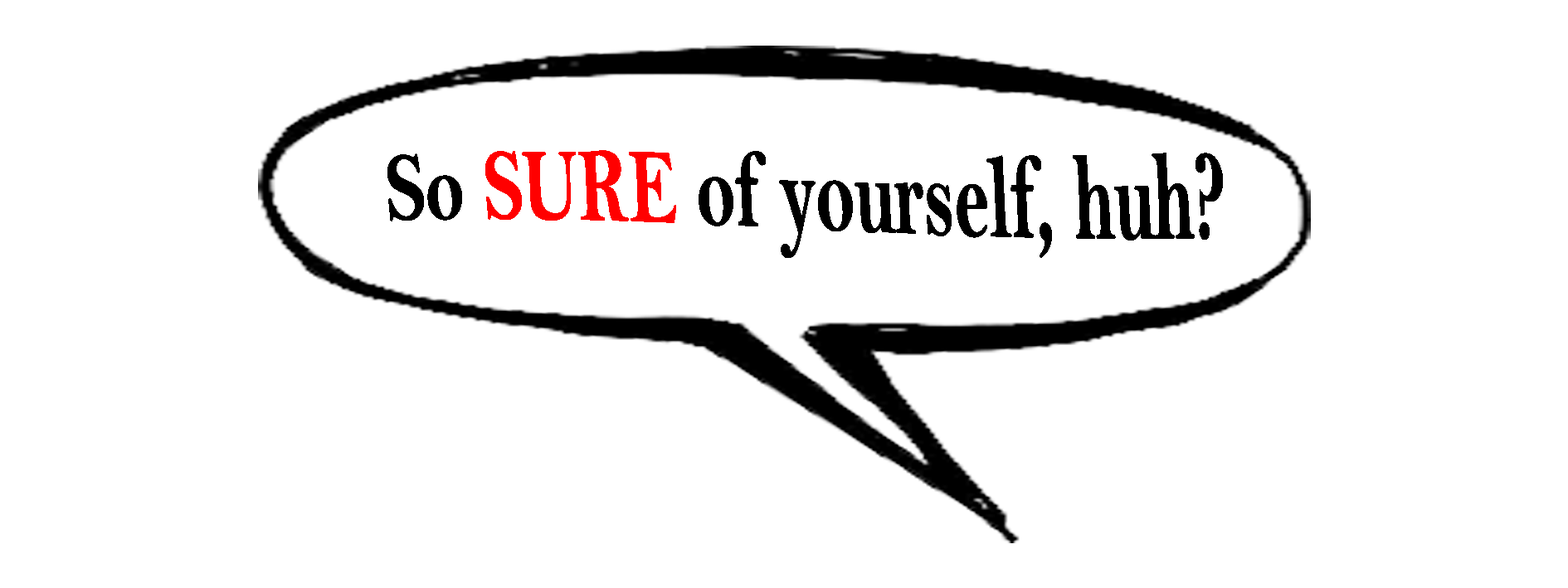
<style>
.page{position:relative;width:1568px;height:588px;background:#ffffff}
.page>*{position:absolute;margin:0}
.t1{font:114.1px "BellMTBold";color:#000000;scale:0.64 1}
.t2{font:114.1px "BellMTBold";color:#ff0000;scale:0.64 1}
</style>
<div class="page">
<p class="t1" style="left:387px;top:150px;width:836px;height:108px;rotate:-2deg">So <span class="t2">SURE</span> of yourself, huh?</p>
</div>
